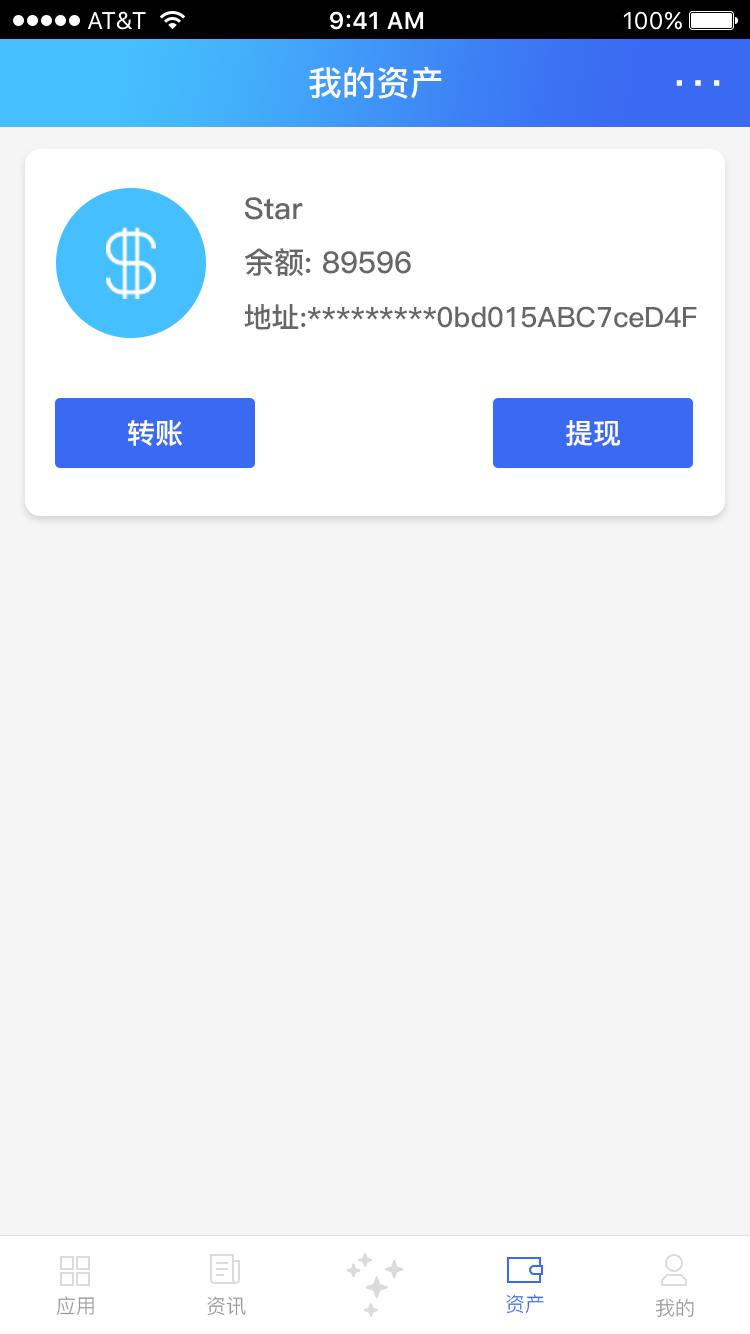
<style>
.page{position:relative;width:750px;height:1334px;background:#f5f5f5}
.page>*{position:absolute;margin:0}
.t1{font:34px "PingFang-SC-Bold";color:#ffffff}
.t2{font:30px "PingFang-SC-Bold";color:#666666}
.t3{font:28px "PingFang-SC-Bold";color:#666666}
.t4{font:28px "PingFang-SC-Bold";color:#ffffff}
.t5{font:20px "PingFang-SC-Regular";color:#999999}
.t6{font:20px "PingFang-SC-Regular";color:#3a6af2}
</style>
<div class="page">
<p class="t1" style="left:309px;top:66px;width:133px;height:33px">我的资产</p>
<p class="t2" style="left:245px;top:197px;width:58px;height:23px">Star</p>
<p class="t2" style="left:245px;top:248px;width:166px;height:28px">余额: 89596</p>
<p class="t3" style="left:244px;top:304px;width:453px;height:26px">地址:*********0bd015ABC7ceD4F</p>
<p class="t4" style="left:128px;top:420px;width:54px;height:26px">转账</p>
<p class="t4" style="left:566px;top:420px;width:54px;height:26px">提现</p>
<p class="t5" style="left:57px;top:1296px;width:37px;height:19px">应用</p>
<p class="t5" style="left:207px;top:1296px;width:39px;height:20px">资讯</p>
<p class="t6" style="left:506px;top:1294px;width:38px;height:19px">资产</p>
<p class="t5" style="left:655px;top:1298px;width:39px;height:19px">我的</p>
</div>
